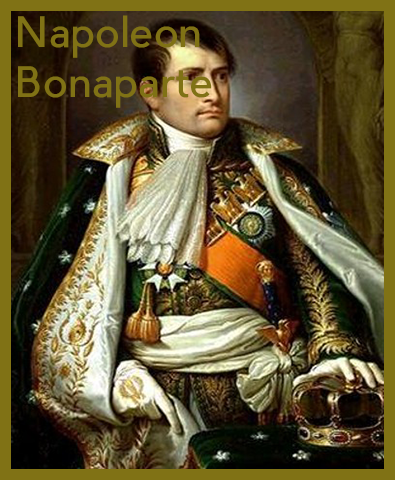
<style>
.page{position:relative;width:395px;height:480px}
.page>*{position:absolute;margin:0}
.t1{font:41px "PierSans";color:#807215}
</style>
<div class="page">
<p class="t1" style="left:18px;top:15px;width:194px;height:93px">Napoleon<br>Bonaparte</p>
</div>
